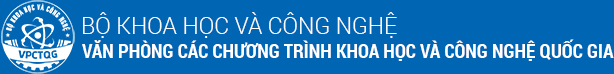
<style>
.page{position:relative;width:614px;height:74px;background:#0066b3}
.page>*{position:absolute;margin:0}
.t1{font:23px "Roboto-Light";color:#ffffff}
.t2{font:19px "RobotoCondensed-Bold";color:#ffffff}
</style>
<div class="page">
<p class="t1" style="left:83px;top:12px;width:314px;height:26px">BỘ KHOA HỌC VÀ CÔNG NGHỆ</p>
<p class="t2" style="left:82px;top:39px;width:532px;height:22px">VĂN PHÒNG CÁC CHƯƠNG TRÌNH KHOA HỌC VÀ CÔNG NGHỆ QUỐC GIA</p>
</div>
